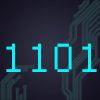
<style>
.page{position:relative;width:100px;height:100px}
.page>*{position:absolute;margin:0}
.t1{font:45px "Courier";color:#00f6ff}
</style>
<div class="page">
<p class="t1" style="left:6px;top:43px;width:91px;height:29px">1101</p>
</div>
